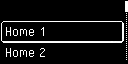
<style>
.page{position:relative;width:128px;height:64px;background:#000000}
.page>*{position:absolute;margin:0}
.t1{font:16px "PixelOperator";color:#ffffff}
</style>
<div class="page">
<p class="t1" style="left:5px;top:27px;width:39px;height:9px">Home 1</p>
<p class="t1" style="left:5px;top:48px;width:40px;height:9px">Home 2</p>
</div>
